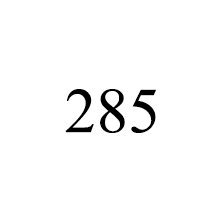
<style>
.page{position:relative;width:221px;height:221px;background:#ffffff}
.page>*{position:absolute;margin:0}
.t1{font:63.9px "TimesNewRomanPSMT";color:#000000}
</style>
<div class="page">
<p class="t1" style="left:65px;top:89px;width:92px;height:44px">285</p>
</div>
